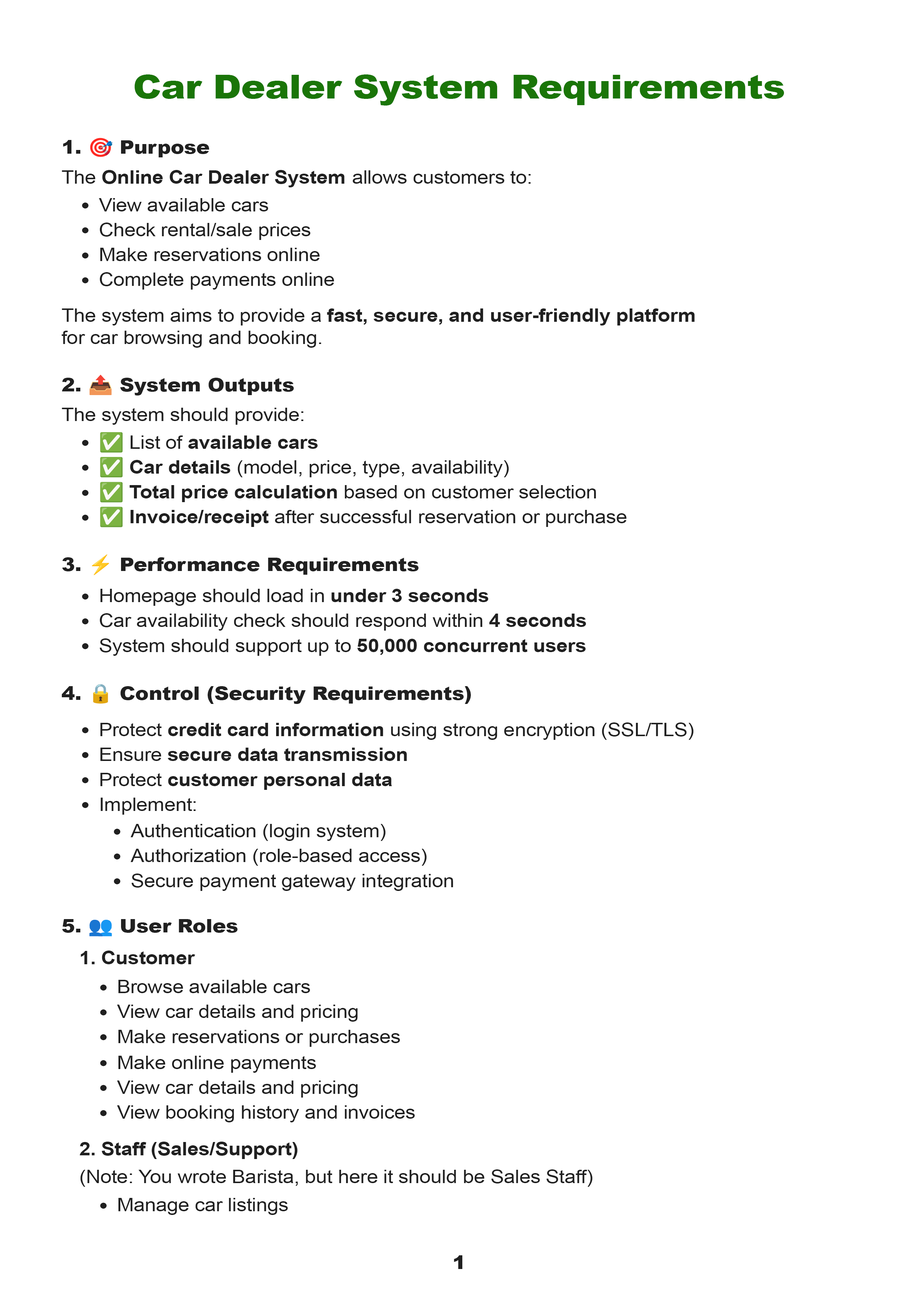
<style>
.page{position:relative;width:918px;height:1299px;background:#ffffff}
.page>*{position:absolute;margin:0}
.t1{font:33.3px "Arial-Black";letter-spacing:-0.01em;color:#1a7508;scale:1.1 1}
.t2{font:18.5px "Arial-Black";letter-spacing:-0.01em;color:#202020;scale:1.1 1}
.t3{font:18.5px "NotoColorEmoji-SVG";letter-spacing:-0.01em;color:#202020;scale:1.1 1}
.t4{font:18.5px "Arial-BoldMT";letter-spacing:-0.01em;color:#202020;scale:1.1 1}
.t5{font:18.5px "ArialMT";letter-spacing:-0.01em;color:#202020;scale:1.1 1}
</style>
<div class="page">
<p class="t1" style="left:134px;top:74px;width:650px;height:32px">Car Dealer System Requirements</p>
<p class="t2" style="left:63px;top:138px;width:146px;height:19px">1. <span class="t3">🎯</span> Purpose</p>
<p class="t4" style="left:62px;top:170px;width:469px;height:17px"><span class="t5">The </span>Online Car Dealer System <span class="t5">allows customers to:</span></p>
<p class="t5" style="left:99px;top:198px;width:169px;height:13px">View available cars</p>
<p class="t5" style="left:100px;top:223px;width:211px;height:17px">Check rental/sale prices</p>
<p class="t5" style="left:100px;top:248px;width:220px;height:13px">Make reservations online</p>
<p class="t5" style="left:100px;top:272px;width:234px;height:18px">Complete payments online</p>
<p class="t4" style="left:61px;top:308px;width:634px;height:40px"><span class="t5">The system aims to provide a </span>fast, secure, and user-friendly platform<span class="t5"> <br>for car browsing and booking.</span></p>
<p class="t2" style="left:62px;top:374px;width:232px;height:21px">2. <span class="t3">📤</span> System Outputs</p>
<p class="t5" style="left:62px;top:408px;width:242px;height:17px">The system should provide:</p>
<p class="t4" style="left:100px;top:432px;width:218px;height:21px"><span class="t3">✅</span><span class="t5"> List of </span>available cars</p>
<p class="t5" style="left:100px;top:457px;width:409px;height:21px"><span class="t3">✅ </span><span class="t4">Car details</span> (model, price, type, availability)</p>
<p class="t5" style="left:100px;top:482px;width:496px;height:20px"><span class="t3">✅ </span><span class="t4">Total price calculation </span>based on customer selection</p>
<p class="t5" style="left:100px;top:506px;width:527px;height:21px"><span class="t3">✅ </span><span class="t4">Invoice/receipt</span> after successful reservation or purchase</p>
<p class="t2" style="left:62px;top:554px;width:357px;height:21px">3. <span class="t3">⚡️</span> Performance Requirements</p>
<p class="t5" style="left:100px;top:589px;width:388px;height:17px">Homepage should load in <span class="t4">under 3 seconds</span></p>
<p class="t5" style="left:100px;top:613px;width:486px;height:17px">Car availability check should respond within <span class="t4">4 seconds</span></p>
<p class="t5" style="left:100px;top:638px;width:486px;height:18px">System should support up to <span class="t4">50,000 concurrent users</span></p>
<p class="t2" style="left:62px;top:684px;width:409px;height:20px">4. <span class="t3">🔒</span> Control (Security Requirements)</p>
<p class="t5" style="left:100px;top:722px;width:594px;height:18px">Protect <span class="t4">credit card information</span> using strong encryption (SSL/TLS)</p>
<p class="t4" style="left:100px;top:747px;width:307px;height:14px"><span class="t5">Ensure </span>secure data transmission</p>
<p class="t4" style="left:100px;top:773px;width:292px;height:17px"><span class="t5">Protect </span>customer personal data</p>
<p class="t5" style="left:101px;top:797px;width:95px;height:17px">Implement:</p>
<p class="t5" style="left:131px;top:824px;width:255px;height:17px">Authentication (login system)</p>
<p class="t5" style="left:131px;top:849px;width:296px;height:17px">Authorization (role-based access)</p>
<p class="t5" style="left:131px;top:873px;width:322px;height:18px">Secure payment gateway integration</p>
<p class="t2" style="left:62px;top:919px;width:176px;height:17px">5. <span class="t3">👥</span> User Roles</p>
<p class="t4" style="left:81px;top:950px;width:114px;height:14px">1. Customer</p>
<p class="t5" style="left:118px;top:980px;width:192px;height:13px">Browse available cars</p>
<p class="t5" style="left:117px;top:1004px;width:241px;height:17px">View car details and pricing</p>
<p class="t5" style="left:118px;top:1030px;width:282px;height:17px">Make reservations or purchases</p>
<p class="t5" style="left:118px;top:1056px;width:198px;height:17px">Make online payments</p>
<p class="t5" style="left:117px;top:1080px;width:241px;height:17px">View car details and pricing</p>
<p class="t5" style="left:117px;top:1105px;width:298px;height:17px">View booking history and invoices</p>
<p class="t4" style="left:80px;top:1141px;width:218px;height:18px">2. Staff (Sales/Support)</p>
<p class="t5" style="left:80px;top:1169px;width:513px;height:18px">(Note: You wrote Barista, but here it should be Sales Staff)</p>
<p class="t5" style="left:118px;top:1198px;width:170px;height:17px">Manage car listings</p>
<p class="t2" style="left:454px;top:1255px;width:8px;height:14px">1</p>
</div>
